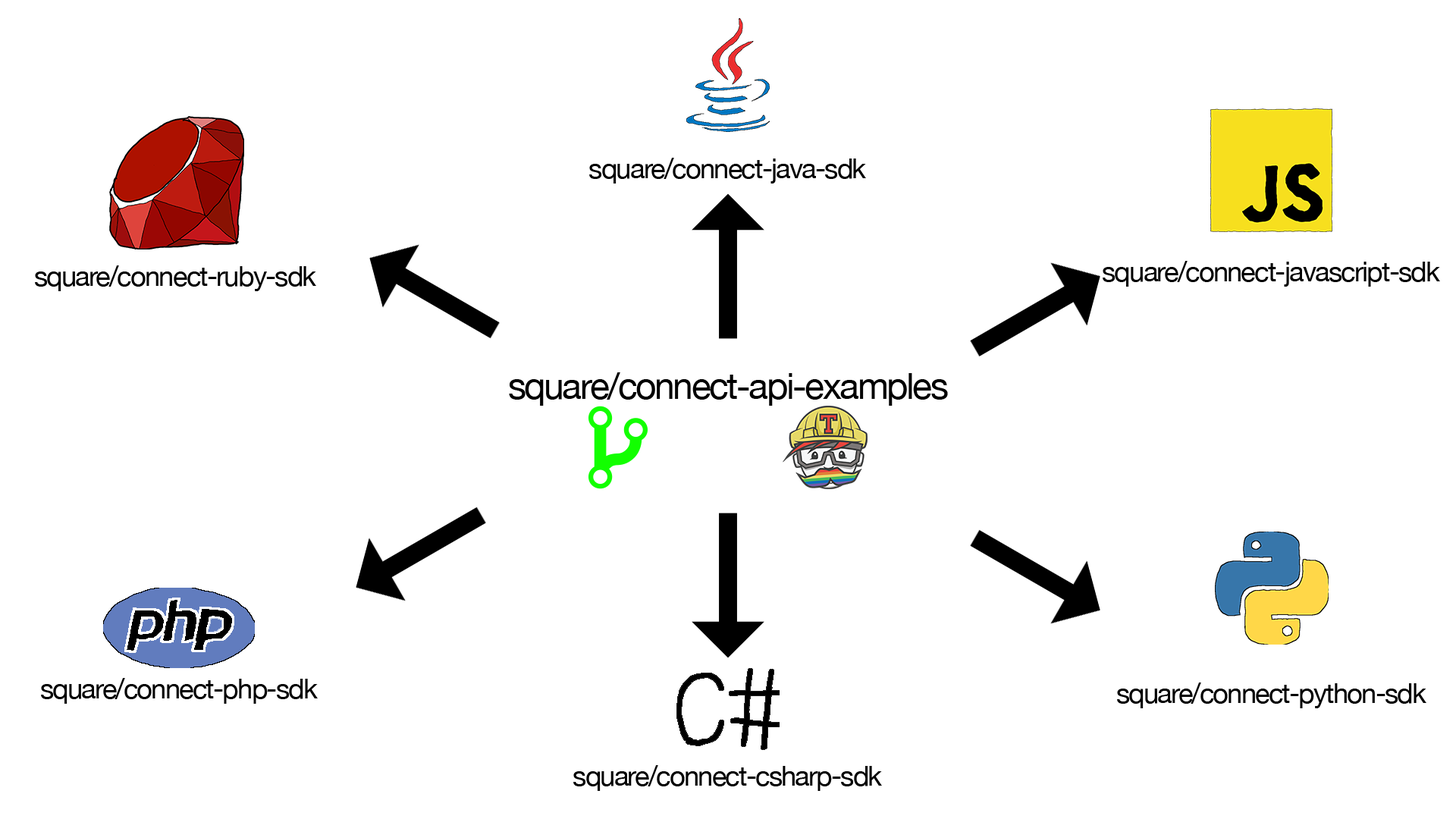
<style>
.page{position:relative;width:1456px;height:819px;background:#ffffff}
.page>*{position:absolute;margin:0}
.t1{font:27.5px "HelveticaNeue";letter-spacing:-0.05em;color:#000000}
.t2{font:36.4px "HelveticaNeue";letter-spacing:-0.05em;color:#000000}
</style>
<div class="page">
<p class="t1" style="left:589px;top:158px;width:277px;height:26px">square/connect-java-sdk</p>
<p class="t1" style="left:35px;top:265px;width:281px;height:26px">square/connect-ruby-sdk</p>
<p class="t1" style="left:1103px;top:261px;width:337px;height:26px">square/connect-javascript-sdk</p>
<p class="t2" style="left:509px;top:372px;width:439px;height:34px">square/connect-api-examples</p>
<p class="t1" style="left:41px;top:678px;width:277px;height:26px">square/connect-php-sdk</p>
<p class="t1" style="left:1117px;top:682px;width:309px;height:26px">square/connect-python-sdk</p>
<p class="t1" style="left:573px;top:765px;width:309px;height:26px">square/connect-csharp-sdk</p>
</div>
